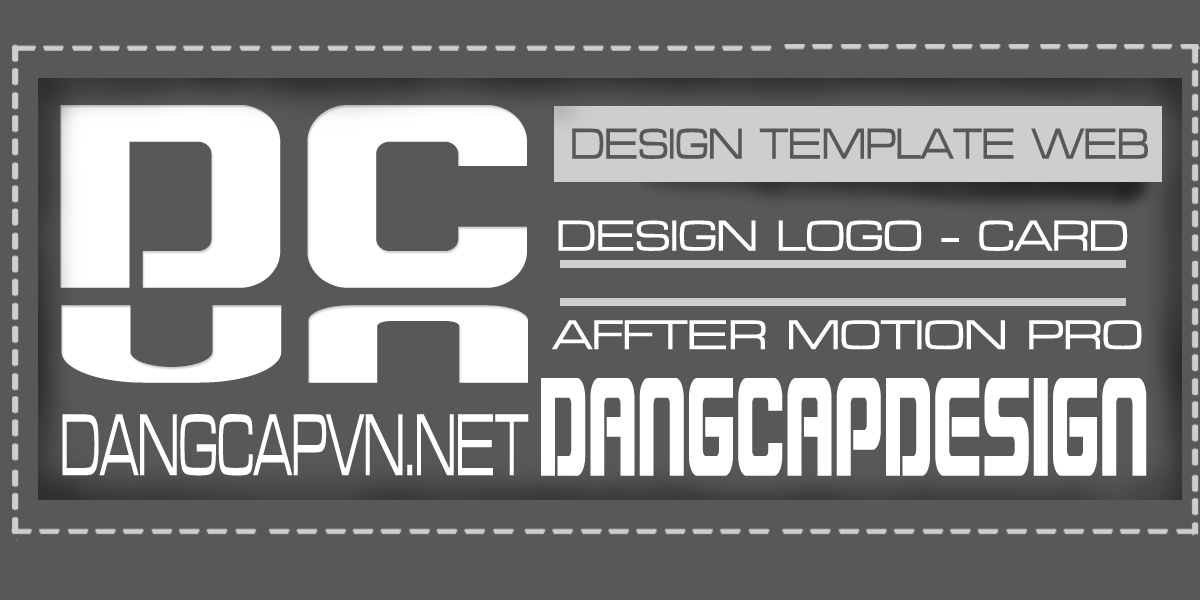
<style>
.page{position:relative;width:1200px;height:600px;background:#565859}
.page>*{position:absolute;margin:0}
.t1{font:316.7px "BlasterInfinite";color:#ffffff;scale:1.13 1}
.t2{font:45px "HP-Dan-Truong-Regular";color:#565859;scale:0.83 1}
.t3{font:45px "HP-Dan-Truong-Regular";color:#ffffff;scale:0.96 1}
.t4{font:133.5px "BlasterInfinite";color:#ffffff;scale:2.67 1}
.t5{font:43px "HP-Dan-Truong-Regular";color:#ffffff;scale:1.05 1}
.t6{font:169.2px "BlasterInfinite";color:#ffffff;scale:0.42 1}
.t7{font:91.1px "HP-Dan-Truong-Regular";color:#ffffff;scale:0.48 1}
</style>
<div class="page">
<p class="t1" style="left:60px;top:105px;width:467px;height:183px">DC</p>
<p class="t2" style="left:572px;top:128px;width:576px;height:31px">DESIGN TEMPLATE WEB</p>
<p class="t3" style="left:558px;top:220px;width:570px;height:31px">DESIGN LOGO - CARD</p>
<p class="t4" style="left:61px;top:305px;width:467px;height:78px">VN</p>
<p class="t5" style="left:552px;top:320px;width:590px;height:30px">AFFTER MOTION PRO</p>
<p class="t6" style="left:541px;top:378px;width:606px;height:98px">DANGCAPDESIGN</p>
<p class="t7" style="left:62px;top:414px;width:467px;height:62px">DANGCAPVN.NET</p>
</div>
